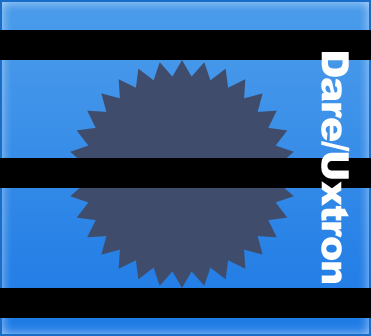
<style>
.page{position:relative;width:371px;height:336px;background:#000000}
.page>*{position:absolute;margin:0}
.t1{font:37.8px "Arial-Black";letter-spacing:-0.03em;color:#ffffff}
</style>
<div class="page">
<p class="t1" style="left:321px;top:52px;width:29px;height:231px;rotate:90deg">Dare/Uxtron</p>
</div>
